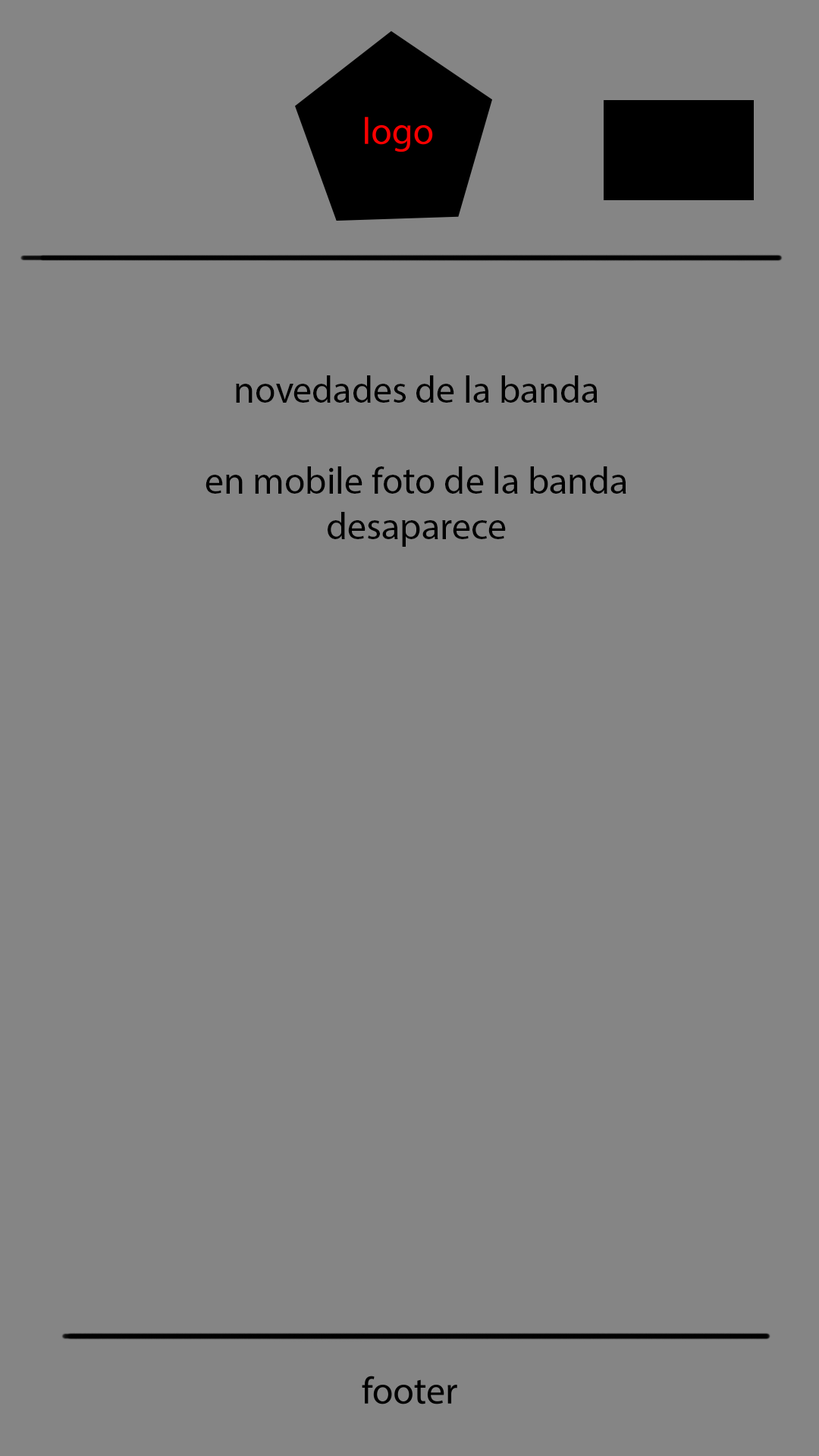
<style>
.page{position:relative;width:819px;height:1456px;background:#858585}
.page>*{position:absolute;margin:0}
.t1{font:37.9px "MyriadPro-Regular";color:#000000}
</style>
<div class="page">
<p class="t1" style="left:206px;top:375px;width:420px;height:172px;text-align:center">novedades de la banda <br><br>en mobile foto de la banda desaparece</p>
</div>
